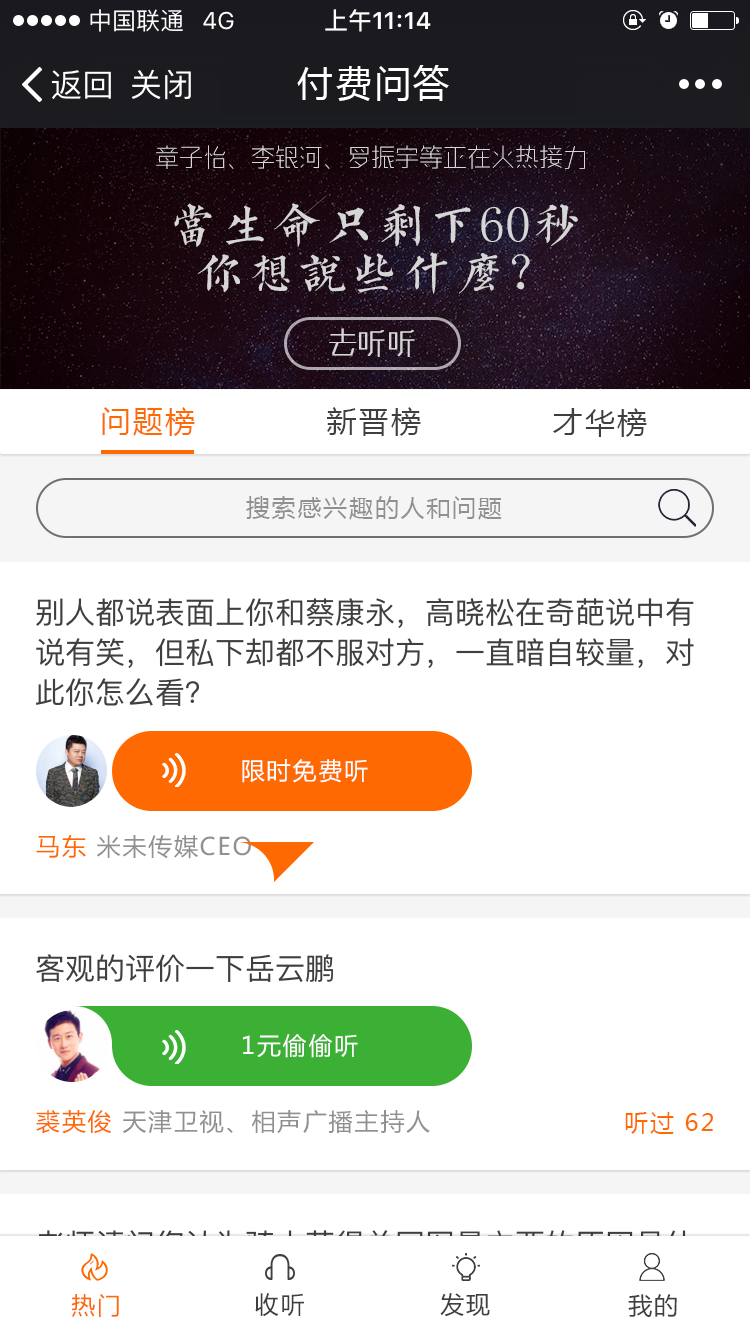
<style>
.page{position:relative;width:750px;height:1334px;background:#ffffff}
.page>*{position:absolute;margin:0}
.t1{font:36px "MicrosoftYaHei";letter-spacing:0.075em;color:#ffffff}
.t2{font:30px "MicrosoftYaHei";letter-spacing:0.075em;color:#ff6901}
.t3{font:30px "MicrosoftYaHei";letter-spacing:0.075em;color:#3f3f3f}
.t4{font:24px "MicrosoftYaHei";letter-spacing:0.075em;color:#909090}
.t5{font:23.9px "MicrosoftYaHei";letter-spacing:0.075em;color:#ffffff}
.t6{font:23.9px "MicrosoftYaHei";letter-spacing:0.075em;color:#909090}
.t7{font:23.9px "MicrosoftYaHei";letter-spacing:0.075em;color:#ff6901}
.t8{font:24px "MicrosoftYaHei";letter-spacing:0.075em;color:#ff6901}
.t9{font:24px "MicrosoftYaHei";letter-spacing:0.075em;color:#3f3f3f}
</style>
<div class="page">
<p class="t1" style="left:297px;top:65px;width:152px;height:36px">付费问答</p>
<p class="t2" style="left:102px;top:407px;width:93px;height:29px">问题榜</p>
<p class="t3" style="left:327px;top:407px;width:94px;height:29px">新晋榜</p>
<p class="t3" style="left:553px;top:408px;width:94px;height:29px">才华榜</p>
<p class="t4" style="left:246px;top:496px;width:256px;height:24px">搜索感兴趣的人和问题</p>
<p class="t5" style="left:242px;top:759px;width:126px;height:24px">限时免费听</p>
<p class="t6" style="left:36px;top:835px;width:215px;height:24px"><span class="t7">马东 </span>米未传媒CEO</p>
<p class="t5" style="left:243px;top:1034px;width:115px;height:24px">1元偷偷听</p>
<p class="t6" style="left:36px;top:1110px;width:394px;height:24px"><span class="t7">裘英俊 </span>天津卫视、相声广播主持人</p>
<p class="t8" style="left:625px;top:1112px;width:88px;height:22px">听过 62</p>
<p class="t8" style="left:71px;top:1294px;width:48px;height:23px">热门</p>
<p class="t9" style="left:255px;top:1293px;width:49px;height:24px">收听</p>
<p class="t9" style="left:440px;top:1293px;width:50px;height:24px">发现</p>
<p class="t9" style="left:628px;top:1294px;width:49px;height:23px">我的</p>
</div>
